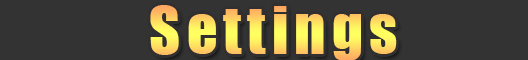
<style>
.page{position:relative;width:528px;height:60px;background:#333333}
.page>*{position:absolute;margin:0}
.t1{font:61.2px "Impact";letter-spacing:0.1em}
</style>
<div class="page">
<p class="t1" style="left:150px;top:5px;width:247px;height:56px">Settings</p>
</div>
